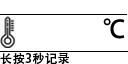
<style>
.page{position:relative;width:128px;height:64px;background:#ffffff}
.page>*{position:absolute;margin:0}
.t1{font:24px "AdobeHeitiStd-Regular";letter-spacing:0.05em;color:#000000}
.t2{font:12px "AdobeHeitiStd-Regular";letter-spacing:0.05em;color:#000000}
</style>
<div class="page">
<p class="t1" style="left:103px;top:18px;width:22px;height:21px">℃</p>
<p class="t2" style="left:0px;top:52px;width:69px;height:13px">长按3秒记录</p>
</div>
